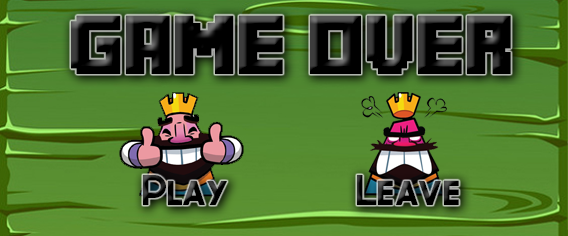
<style>
.page{position:relative;width:568px;height:236px}
.page>*{position:absolute;margin:0}
.t1{font:58.3px "MineCrafter-3";color:#000000}
.t2{font:41.7px "Lavoir-SmallCaps";color:#000000}
</style>
<div class="page">
<p class="t1" style="left:71px;top:15px;width:440px;height:59px">Game Over</p>
<p class="t2" style="left:143px;top:175px;width:316px;height:30px">Play      Leave</p>
</div>
